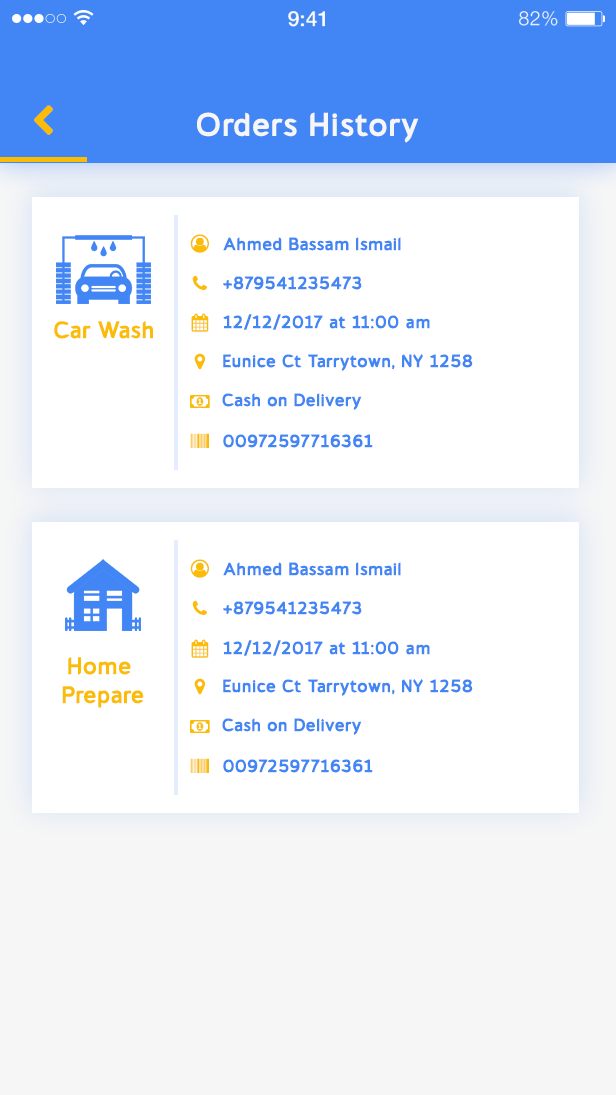
<style>
.page{position:relative;width:616px;height:1095px;background:#ffffff}
.page>*{position:absolute;margin:0}
.t1{font:21.3px "HelveticaNeue-Medium";color:#ffffff}
.t2{font:19.6px "HelveticaNeue-Light";letter-spacing:0.025em;color:#ffffff}
.t3{font:33px "cajitobold";color:#f6f6f6}
.t4{font:18px "cajitobold";color:#4285f4}
.t5{font:24px "cajitobold";color:#fbbc05}
.t6{font:24px/28.9px "cajitobold";color:#fbbc05}
</style>
<div class="page">
<p class="t1" style="left:288px;top:11px;width:37px;height:16px">9:41</p>
<p class="t2" style="left:519px;top:11px;width:39px;height:15px">82%</p>
<p class="t3" style="left:197px;top:112px;width:222px;height:31px">Orders History</p>
<p class="t4" style="left:223px;top:237px;width:178px;height:14px">Ahmed Bassam Ismail</p>
<p class="t4" style="left:223px;top:276px;width:139px;height:14px">+879541235473</p>
<p class="t4" style="left:223px;top:314px;width:207px;height:16px">12/12/2017 at 11:00 am</p>
<p class="t5" style="left:54px;top:321px;width:99px;height:18px">Car Wash</p>
<p class="t4" style="left:223px;top:354px;width:250px;height:17px">Eunice Ct Tarrytown, NY 1258</p>
<p class="t4" style="left:222px;top:393px;width:140px;height:17px">Cash on Delivery</p>
<p class="t4" style="left:223px;top:434px;width:150px;height:14px">00972597716361</p>
<p class="t4" style="left:223px;top:562px;width:178px;height:14px">Ahmed Bassam Ismail</p>
<p class="t4" style="left:223px;top:601px;width:139px;height:14px">+879541235473</p>
<p class="t4" style="left:223px;top:640px;width:207px;height:16px">12/12/2017 at 11:00 am</p>
<p class="t6" style="left:62px;top:657px;width:82px;height:51px;text-align:center">Home <br>Prepare</p>
<p class="t4" style="left:223px;top:679px;width:250px;height:17px">Eunice Ct Tarrytown, NY 1258</p>
<p class="t4" style="left:222px;top:718px;width:140px;height:17px">Cash on Delivery</p>
<p class="t4" style="left:223px;top:759px;width:150px;height:14px">00972597716361</p>
</div>
